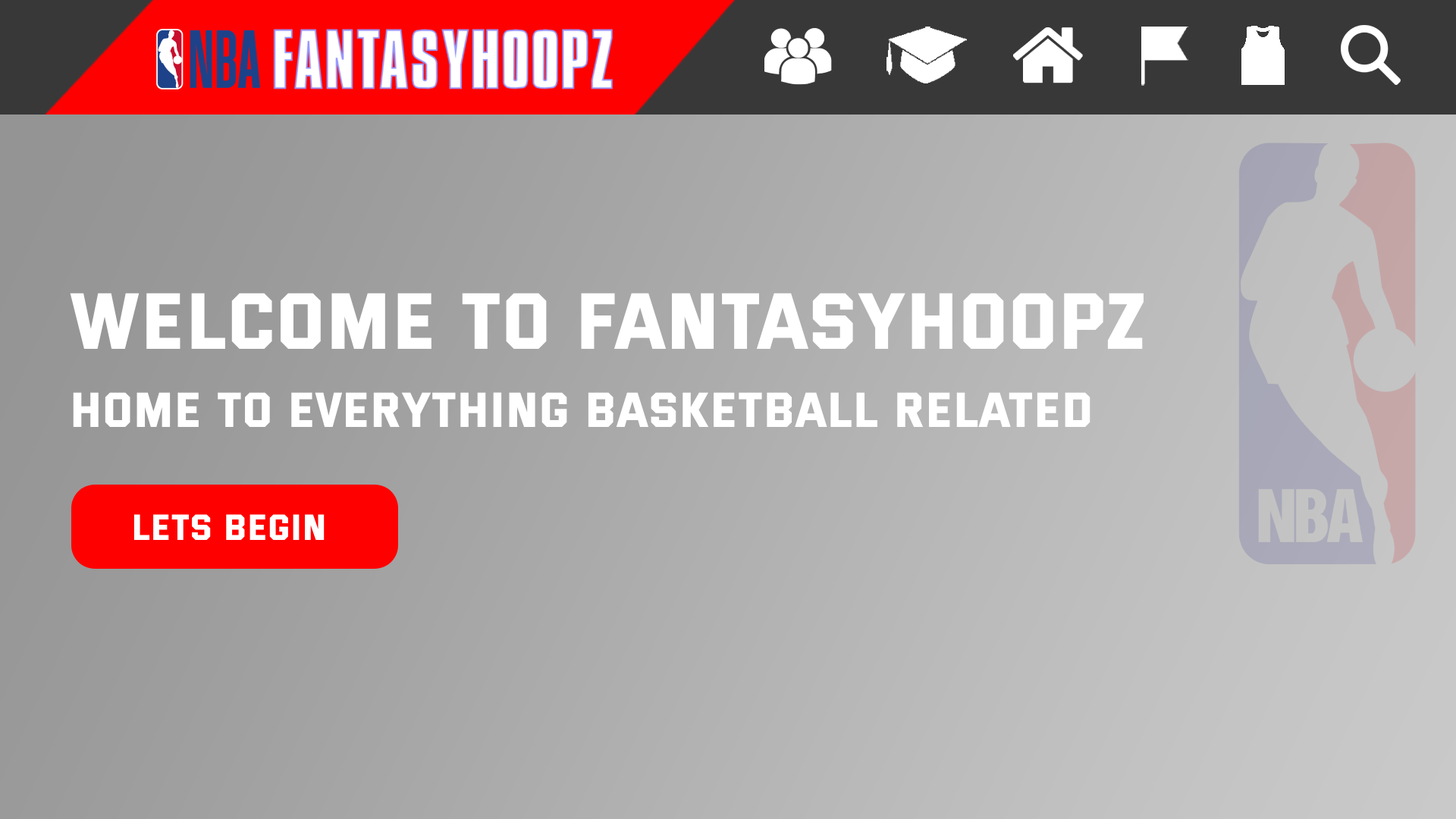
<style>
.page{position:relative;width:1456px;height:819px}
.page>*{position:absolute;margin:0}
.t1{font:79.6px "Versa-Versa";color:#ffffff}
.t2{font:49.3px "Versa-Versa";color:#ffffff}
.t3{font:36.4px "Versa-Versa";color:#ffffff}
</style>
<div class="page">
<p class="t1" style="left:70px;top:293px;width:1074px;height:56px">Welcome to FantasyHoopz</p>
<p class="t2" style="left:73px;top:392px;width:1017px;height:35px">Home to everything basketball related</p>
<p class="t3" style="left:133px;top:514px;width:192px;height:26px">Lets begin</p>
</div>
